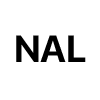
<style>
.page{position:relative;width:100px;height:100px;background:#ffffff}
.page>*{position:absolute;margin:0}
.t1{font:37.5px "SFProDisplay-Bold";color:#000000}
</style>
<div class="page">
<p class="t1" style="left:16px;top:35px;width:70px;height:27px">NAL</p>
</div>
